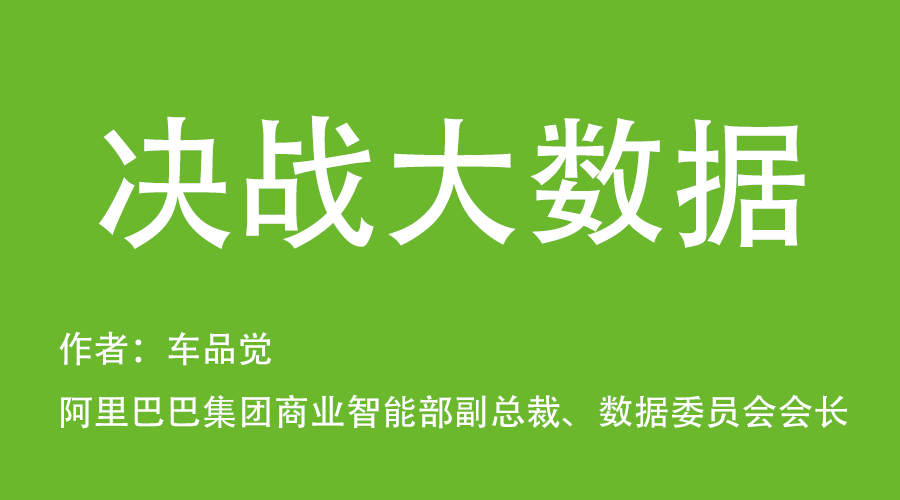
<style>
.page{position:relative;width:900px;height:500px;background:#6bb82d}
.page>*{position:absolute;margin:0}
.t1{font:144px "AdobeHeitiStd-Regular";color:#ffffff}
.t2{font:36px "AdobeHeitiStd-Regular";color:#ffffff}
</style>
<div class="page">
<p class="t1" style="left:99px;top:115px;width:706px;height:134px">决战大数据</p>
<p class="t2" style="left:59px;top:331px;width:789px;height:98px">作者：车品觉 <br>阿里巴巴集团商业智能部副总裁、数据委员会会长</p>
</div>
